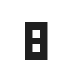
<style>
.page{position:relative;width:74px;height:74px;background:#ffffff}
.page>*{position:absolute;margin:0}
.t1{font:60px "04b24";color:#1f1f1f}
</style>
<div class="page">
<p class="t1" style="left:25px;top:22px;width:23px;height:38px">8</p>
</div>
